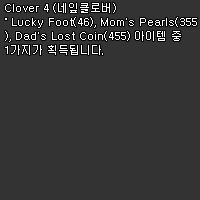
<style>
.page{position:relative;width:200px;height:200px;background:#333333}
.page>*{position:absolute;margin:0}
.t1{font:11px/14px "Dotum";color:#ffffff}
</style>
<div class="page">
<p class="t1" style="left:5px;top:3px;width:192px;height:52px">Clover 4 (네잎클로버)<br>˚ Lucky Foot(46), Mom's Pearls(355<br>), Dad's Lost Coin(455) 아이템 중<br>1가지가 획득됩니다.</p>
</div>
